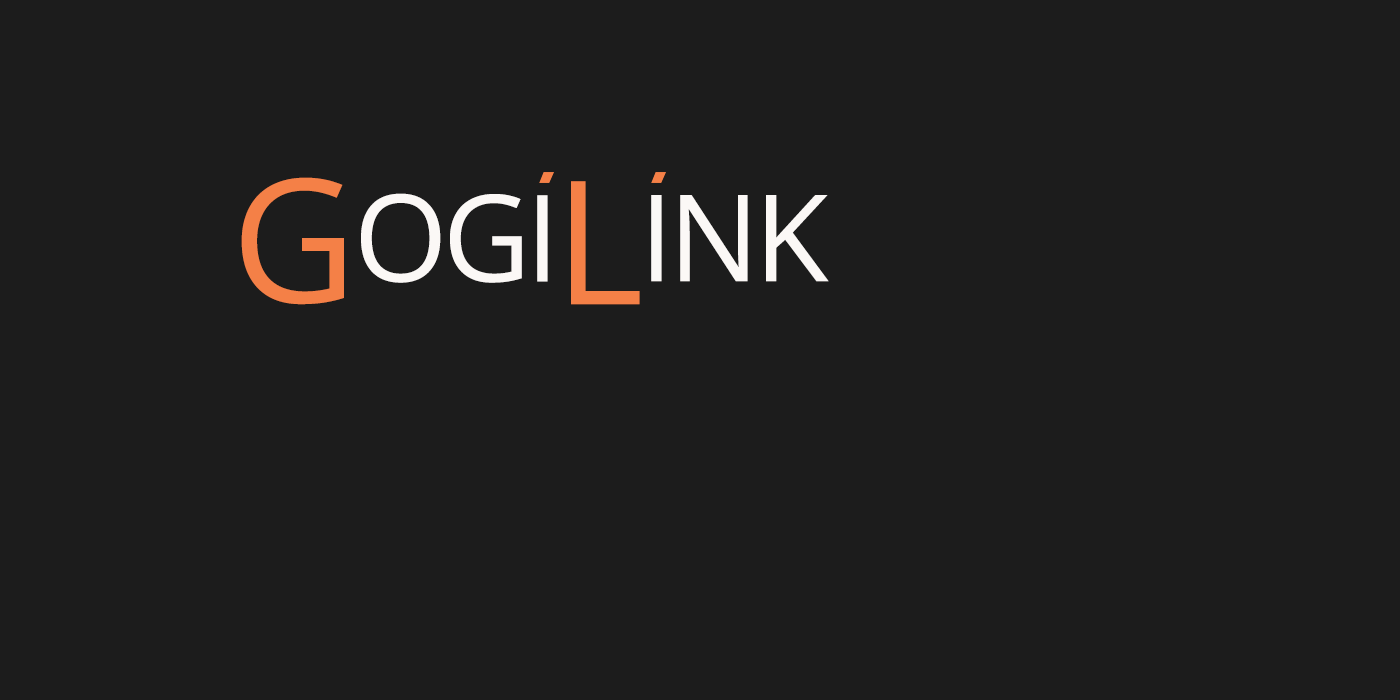
<style>
.page{position:relative;width:1400px;height:700px;background:#1c1c1c}
.page>*{position:absolute;margin:0}
.t1{font:172px "OpenSans";letter-spacing:-0.04em;color:#f48047;font-variant:small-caps}
.t2{font:172px "OpenSans";letter-spacing:-0.04em;color:#fbf8f6;font-variant:small-caps}
</style>
<div class="page">
<p class="t1" style="left:241px;top:177px;width:103px;height:128px">G</p>
<p class="t1" style="left:571px;top:181px;width:69px;height:124px">L</p>
<p class="t2" style="left:361px;top:193px;width:187px;height:90px">ogi</p>
<p class="t2" style="left:651px;top:195px;width:178px;height:87px">ink</p>
</div>
